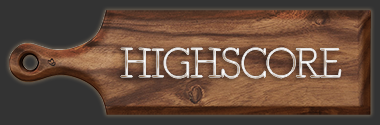
<style>
.page{position:relative;width:380px;height:125px;background:#333333}
.page>*{position:absolute;margin:0}
.t1{font:40px "FragmentCoreRom"}
</style>
<div class="page">
<p class="t1" style="left:121px;top:48px;width:220px;height:30px">HIGHSCORE</p>
</div>
